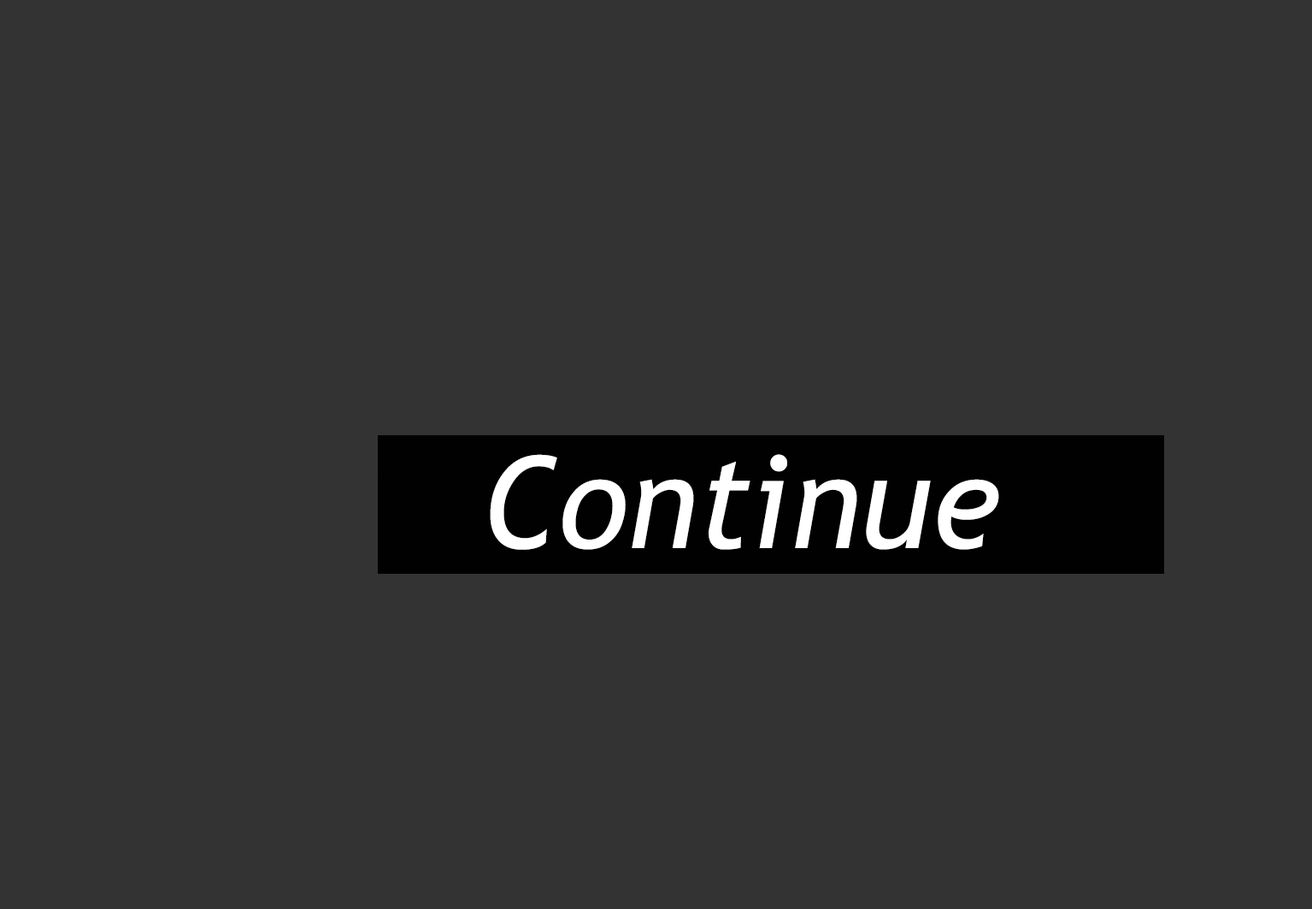
<style>
.page{position:relative;width:1312px;height:909px;background:#333333}
.page>*{position:absolute;margin:0}
.t1{font:128.2px "TrebuchetMS-Italic";color:#ffffff}
</style>
<div class="page">
<p class="t1" style="left:490px;top:454px;width:509px;height:96px">Continue</p>
</div>
